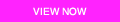
<style>
.page{position:relative;width:120px;height:22px;background:#ff23fe}
.page>*{position:absolute;margin:0}
.t1{font:10px "HelveticaLTStd-Roman";color:#ffffff}
</style>
<div class="page">
<p class="t1" style="left:33px;top:7px;width:54px;height:9px">VIEW NOW</p>
</div>
